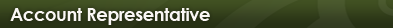
<style>
.page{position:relative;width:393px;height:28px}
.page>*{position:absolute;margin:0}
.t1{font:18px "CenturyGothic-Bold";letter-spacing:-0.025em;color:#faf7f5}
</style>
<div class="page">
<p class="t1" style="left:10px;top:8px;width:200px;height:17px">Account Representative</p>
</div>
